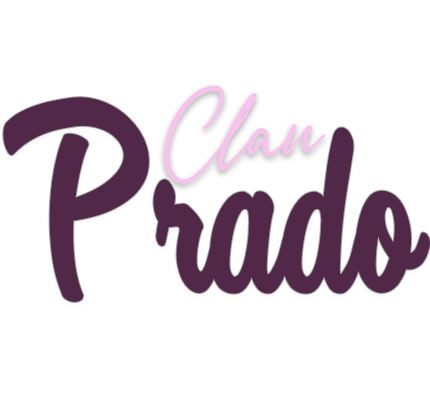
<style>
.page{position:relative;width:430px;height:405px;background:#ffffff}
.page>*{position:absolute;margin:0}
.t1{font:125.6px "Signatria-Regular";color:#f7c2ec}
.t2{font:257.8px "BlackRosePersonalUse-Regular";color:#522849}
</style>
<div class="page">
<p class="t1" style="left:164px;top:85px;width:162px;height:99px">Clau</p>
<p class="t2" style="left:3px;top:97px;width:427px;height:205px">Prado</p>
</div>
